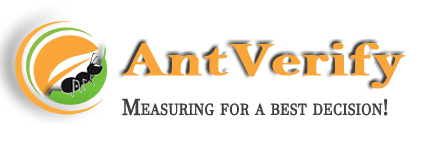
<style>
.page{position:relative;width:425px;height:142px;background:#ffffff}
.page>*{position:absolute;margin:0}
.t1{font:48px "BellMTBold";color:#faa53a;font-weight:bold;scale:1.3 1}
.t2{font:21.9px "JavaneseText";color:#434040;font-variant:small-caps;font-weight:bold;scale:0.9 1}
</style>
<div class="page">
<p class="t1" style="left:122px;top:43px;width:284px;height:46px">AntVerify</p>
<p class="t2" style="left:122px;top:98px;width:266px;height:18px">Measuring for a best decision!</p>
</div>
